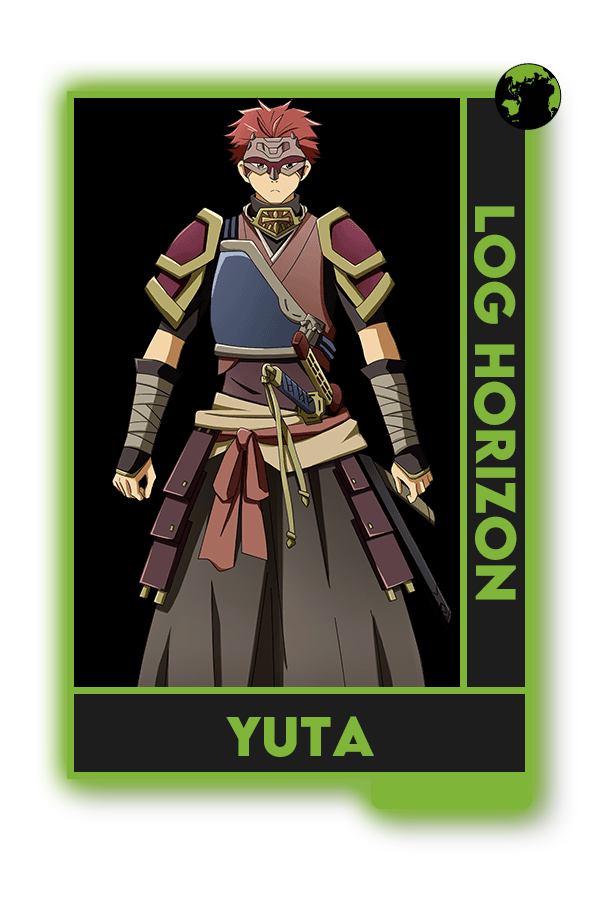
<style>
.page{position:relative;width:600px;height:900px;background:#ffffff}
.page>*{position:absolute;margin:0}
.t1{font:50px "LEMONMILK-Bold";color:#7fad41}
</style>
<div class="page">
<p class="t1" style="left:474px;top:206px;width:43px;height:394px;rotate:90deg">Log Horizon</p>
<p class="t1" style="left:226px;top:716px;width:148px;height:41px">Yuta</p>
</div>
